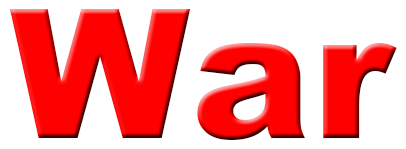
<style>
.page{position:relative;width:406px;height:149px;background:#ffffff}
.page>*{position:absolute;margin:0}
.t1{font:180px "Arial-Black";letter-spacing:0.005em;color:#ff0000}
</style>
<div class="page">
<p class="t1" style="left:9px;top:9px;width:388px;height:131px">War</p>
</div>
